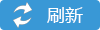
<style>
.page{position:relative;width:100px;height:30px;background:#3998d6}
.page>*{position:absolute;margin:0}
.t1{font:18px "MicrosoftYaHei";color:#ffffff}
</style>
<div class="page">
<p class="t1" style="left:47px;top:7px;width:36px;height:16px">刷新</p>
</div>
